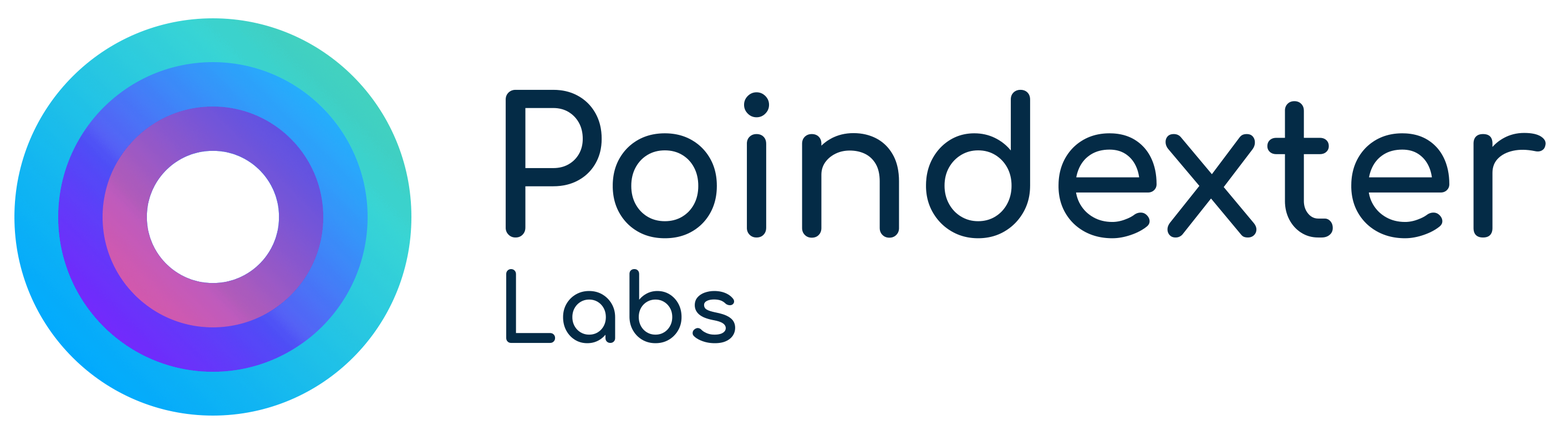
<style>
.page{position:relative;width:1568px;height:435px;background:#ffffff}
.page>*{position:absolute;margin:0}
.t1{font:188.9px/125.9px "Comfortaa-Bold";color:#042b46}
.t2{font:94.4px/105.1px "Comfortaa-Bold";color:#042b46}
</style>
<div class="page">
<p class="t1" style="left:506px;top:89px;width:1040px;height:254px">Poindexter<br> <span class="t2">Labs</span></p>
</div>
